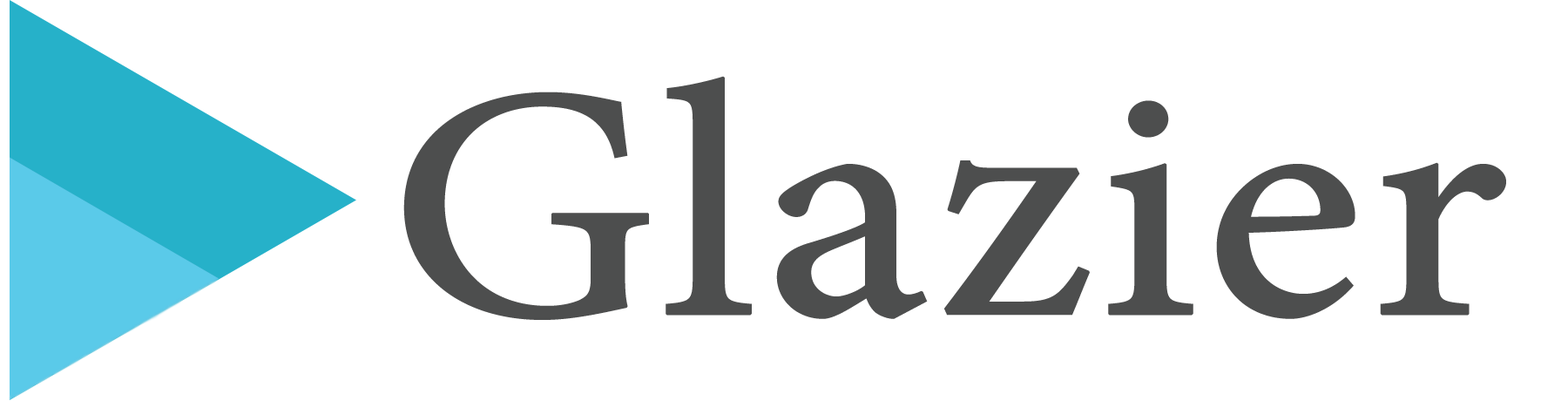
<style>
.page{position:relative;width:1568px;height:401px;background:#ffffff}
.page>*{position:absolute;margin:0}
.t1{font:331px "MinionPro-Regular";letter-spacing:-0.01em;color:#4d4e4e;font-weight:bold;scale:1.13 1}
</style>
<div class="page">
<p class="t1" style="left:403px;top:76px;width:1103px;height:244px">Glazier</p>
</div>
